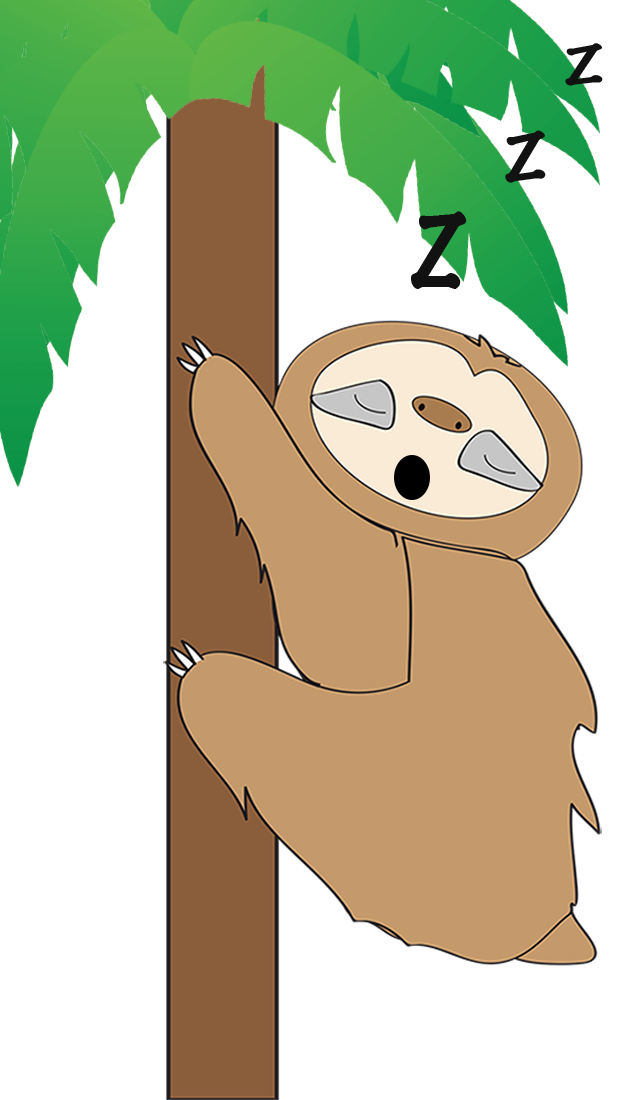
<style>
.page{position:relative;width:617px;height:1100px;background:#ffffff}
.page>*{position:absolute;margin:0}
.t1{font:46.8px "MarkerFelt-Thin";color:#121212;scale:1.47 1}
.t2{font:57.1px "MarkerFelt-Thin";color:#121212;scale:1.31 1}
.t3{font:91.5px "MarkerFelt-Thin";color:#121212}
</style>
<div class="page">
<p class="t1" style="left:565px;top:43px;width:38px;height:43px;rotate:-7deg">Z</p>
<p class="t2" style="left:505px;top:130px;width:41px;height:53px;rotate:-8deg">Z</p>
<p class="t3" style="left:411px;top:211px;width:56px;height:78px">Z</p>
</div>
